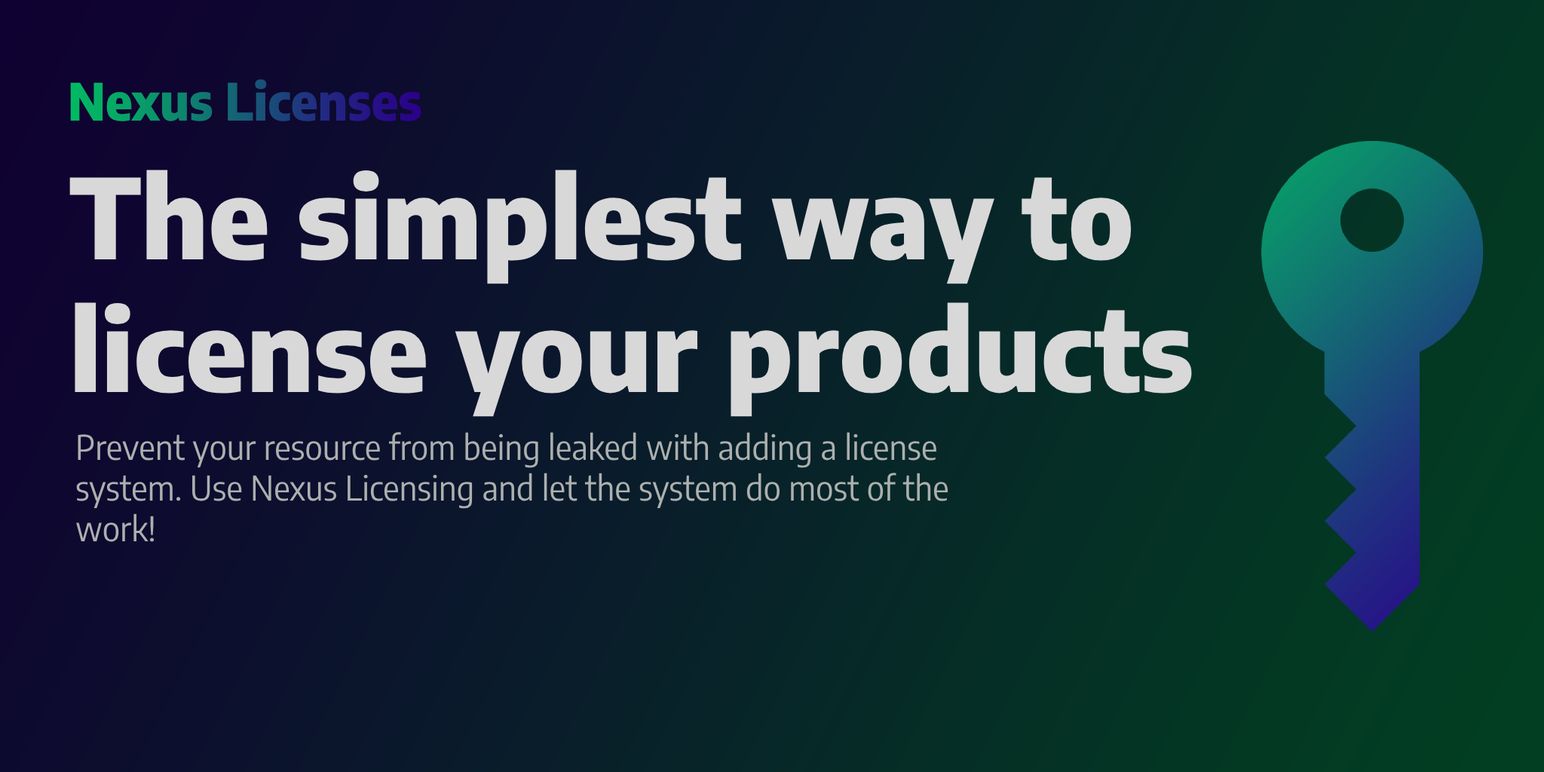
<style>
.page{position:relative;width:1544px;height:772px}
.page>*{position:absolute;margin:0}
.t1{font:110.5px "EncodeSansSemiCondensed-ExtraBold";color:#d8d8d8;scale:1.05 1}
.t2{font:33.9px "EncodeSansSemiCondensed-Regular";color:#acb0ae}
</style>
<div class="page">
<p class="t1" style="left:69px;top:170px;width:1123px;height:247px">The simplest way to license your products</p>
<p class="t2" style="left:76px;top:432px;width:873px;height:110px">Prevent your resource from being leaked with adding a license system. Use Nexus Licensing and let the system do most of the work!</p>
</div>
